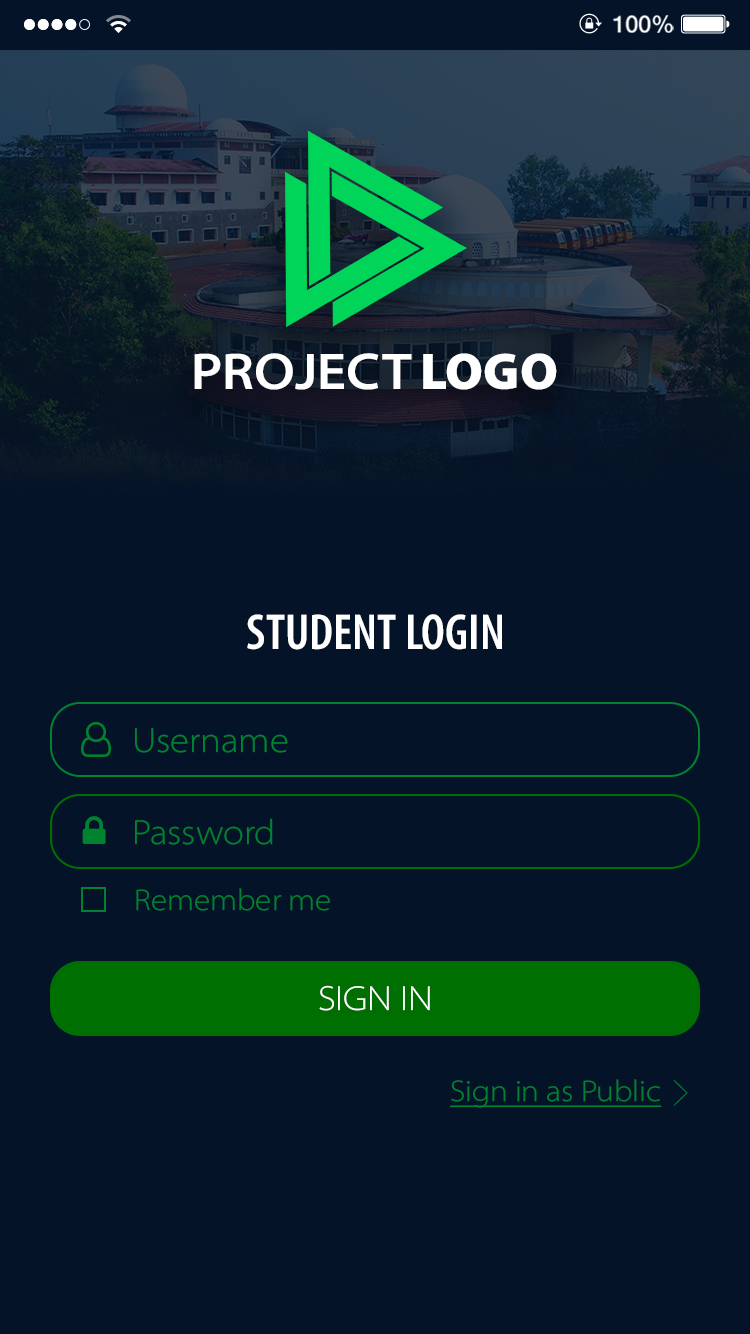
<style>
.page{position:relative;width:750px;height:1334px;background:#051328}
.page>*{position:absolute;margin:0}
.t1{font:23.7px "HelveticaNeue-Medium";color:#ffffff}
.t2{font:52px "MyriadConceptRoman-SemiboldSemiExtended";color:#ffffff}
.t3{font:52px "MyriadConceptRoman-Black";color:#ffffff}
.t4{font:50.9px "MyriadConceptRoman-SemiboldCondensed";color:#ffffff}
.t5{font:35px "MyriadConceptRoman-LightSemiExtended";color:#008330}
.t6{font:30px "MyriadConceptRoman-LightSemiExtended";color:#008330}
.t7{font:35px "MyriadConceptRoman-LightSemiExtended";color:#ffffff}
.t8{font:30px "MyriadConceptRoman-LightSemiExtended";color:#008330;text-decoration:underline}
</style>
<div class="page">
<p class="t1" style="left:613px;top:15px;width:61px;height:18px">100%</p>
<p class="t2" style="left:194px;top:353px;width:363px;height:37px">PROJECT <span class="t3">LOGO</span></p>
<p class="t4" style="left:247px;top:614px;width:255px;height:36px">STUDENT LOGIN</p>
<p class="t5" style="left:135px;top:728px;width:153px;height:25px">Username</p>
<p class="t5" style="left:135px;top:818px;width:138px;height:27px">Password</p>
<p class="t6" style="left:136px;top:888px;width:194px;height:23px">Remember me</p>
<p class="t7" style="left:319px;top:985px;width:111px;height:26px">SIGN IN</p>
<p class="t8" style="left:450px;top:1079px;width:212px;height:29px">Sign in as Public</p>
</div>
